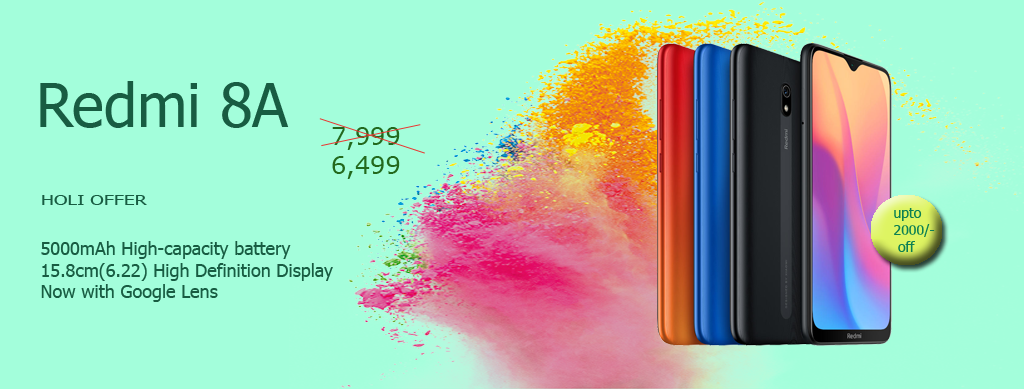
<style>
.page{position:relative;width:1024px;height:389px;background:#a3fedb}
.page>*{position:absolute;margin:0}
.t1{font:24px "Verdana";color:#23691d}
.t2{font:13.5px "Tahoma";color:#185c42;scale:1.43 1}
.t3{font:14px "Tahoma";color:#0c8053}
.t4{font:18px "Tahoma";color:#185c42}
</style>
<div class="page">
<p class="t1" style="left:332px;top:127px;width:68px;height:52px">7,999<br> 6,499</p>
<p class="t2" style="left:42px;top:195px;width:105px;height:10px">HOLI OFFER</p>
<p class="t3" style="left:894px;top:208px;width:41px;height:44px">upto <br>2000/-<br> off</p>
<p class="t4" style="left:41px;top:241px;width:292px;height:61px">5000mAh High-capacity battery<br>15.8cm(6.22) High Definition Display<br>Now with Google Lens</p>
</div>
